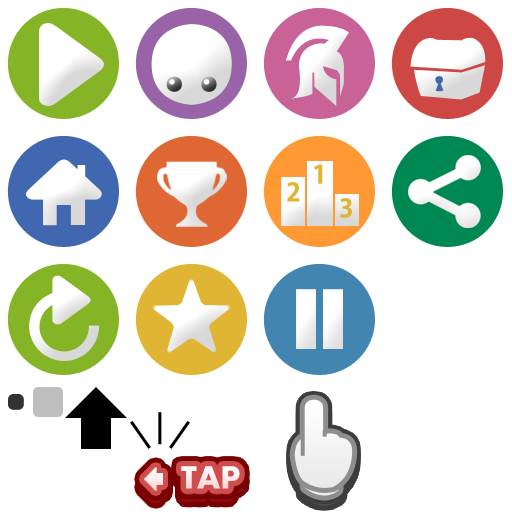
<style>
.page{position:relative;width:512px;height:512px;background:#ffffff}
.page>*{position:absolute;margin:0}
.t1{font:25px "AdobeGothicStd-Bold";color:#dfb533}
.t2{font:33.2px "Aharoni-Bold";color:#ffffff}
</style>
<div class="page">
<p class="t1" style="left:314px;top:164px;width:9px;height:20px">1</p>
<p class="t1" style="left:287px;top:182px;width:13px;height:20px">2</p>
<p class="t1" style="left:340px;top:198px;width:12px;height:20px">3</p>
<p class="t2" style="left:181px;top:466px;width:59px;height:23px">TAP</p>
</div>
